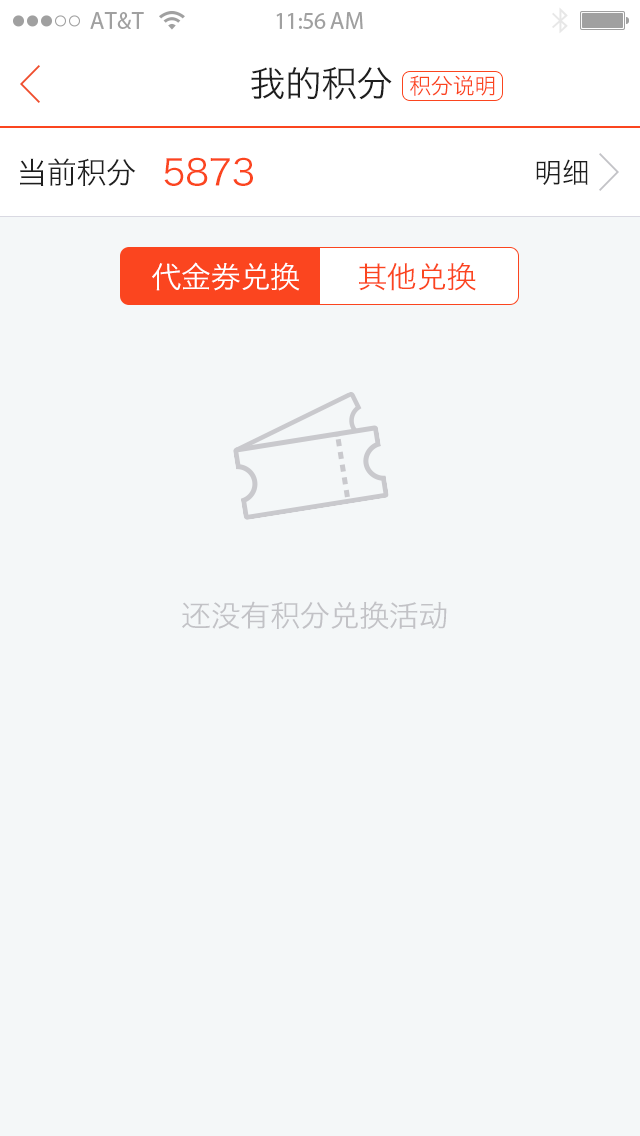
<style>
.page{position:relative;width:640px;height:1136px;background:#f4f7f8}
.page>*{position:absolute;margin:0}
.t1{font:36px "HiraginoSansGB-W3";letter-spacing:-0.01em;color:#1e1e1e}
.t2{font:22px "HiraginoSansGB-W3";letter-spacing:-0.01em;color:#fb451f}
.t3{font:30px "HiraginoSansGB-W3";letter-spacing:-0.01em;color:#1e1e1e}
.t4{font:36px "HiraginoSansGB-W3";letter-spacing:-0.01em;color:#fb451f}
.t5{font:28px "HiraginoSansGB-W3";letter-spacing:-0.01em;color:#1e1e1e}
.t6{font:30px "HiraginoSansGB-W3";letter-spacing:-0.01em;color:#ffffff}
.t7{font:30px "HiraginoSansGB-W3";letter-spacing:-0.01em;color:#fb451f}
.t8{font:30px "HiraginoSansGB-W3";letter-spacing:-0.01em;color:#c2c2c6}
</style>
<div class="page">
<p class="t1" style="left:251px;top:67px;width:141px;height:33px">我的积分</p>
<p class="t2" style="left:410px;top:75px;width:85px;height:21px">积分说明</p>
<p class="t3" style="left:20px;top:158px;width:116px;height:28px">当前积分</p>
<p class="t4" style="left:164px;top:157px;width:89px;height:29px">5873</p>
<p class="t5" style="left:536px;top:159px;width:52px;height:26px">明细</p>
<p class="t6" style="left:152px;top:262px;width:148px;height:29px">代金券兑换</p>
<p class="t7" style="left:359px;top:262px;width:117px;height:29px">其他兑换</p>
<p class="t8" style="left:182px;top:601px;width:265px;height:29px">还没有积分兑换活动</p>
</div>
